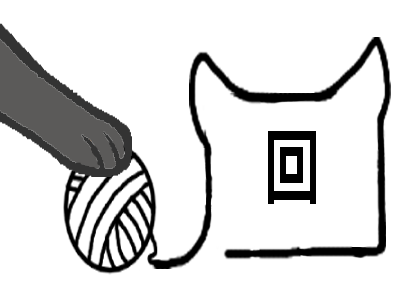
<style>
.page{position:relative;width:400px;height:300px;background:#ffffff}
.page>*{position:absolute;margin:0}
.t1{font:85.5px "DFNHei-W9-WIN-BF";color:#000000;scale:0.71 1}
</style>
<div class="page">
<p class="t1" style="left:268px;top:131px;width:48px;height:73px">回</p>
</div>
